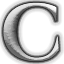
<style>
.page{position:relative;width:64px;height:64px;background:#ffffff}
.page>*{position:absolute;margin:0}
.t1{font:80px "CinzelDecorative-Bold"}
</style>
<div class="page">
<p class="t1" style="left:3px;top:2px;width:56px;height:60px">c</p>
</div>
